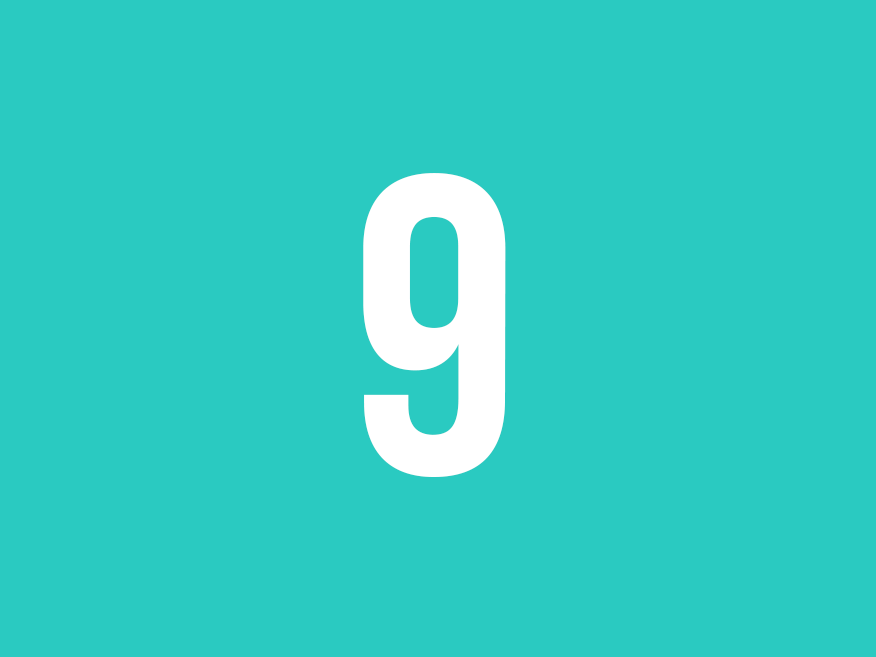
<style>
.page{position:relative;width:876px;height:657px;background:#2acac1}
.page>*{position:absolute;margin:0}
.t1{font:425px "BebasNeueBold";color:#ffffff}
</style>
<div class="page">
<p class="t1" style="left:363px;top:173px;width:143px;height:304px">9</p>
</div>
